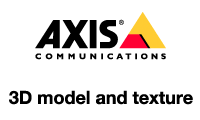
<style>
.page{position:relative;width:200px;height:120px;background:#ffffff}
.page>*{position:absolute;margin:0}
.t1{font:18px "HelveticaNeueLTPro-Bd";color:#000000}
</style>
<div class="page">
<p class="t1" style="left:9px;top:90px;width:184px;height:15px">3D model and texture</p>
</div>
